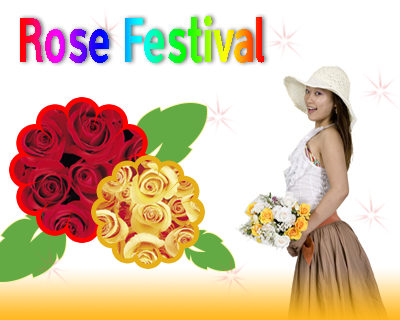
<style>
.page{position:relative;width:400px;height:320px;background:#ffffff}
.page>*{position:absolute;margin:0}
.t1{font:57.4px "KoreanGD18-R";scale:0.71 1}
</style>
<div class="page">
<p class="t1" style="left:20px;top:16px;width:244px;height:47px">Rose Festival</p>
</div>
